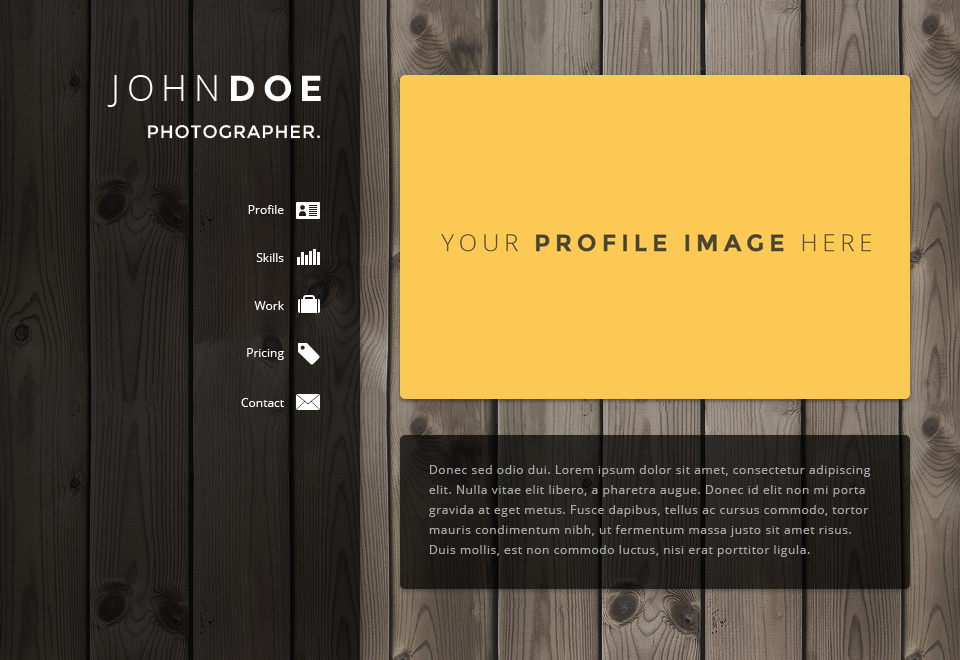
<style>
.page{position:relative;width:960px;height:660px;background:#fcc954}
.page>*{position:absolute;margin:0}
.t1{font:36px "OpenSans-Light";letter-spacing:0.2em;color:#ffffff;text-transform:uppercase}
.t2{font:36px "Montserrat-Bold";letter-spacing:0.2em;color:#ffffff;text-transform:uppercase}
.t3{font:18px "Montserrat-Regular";letter-spacing:0.05em;color:#ffffff;text-transform:uppercase}
.t4{font:12px "OpenSans";color:#ffffff}
.t5{font:12px/20px "OpenSans";letter-spacing:0.05em;color:#a7abad}
</style>
<div class="page">
<p class="t1" style="left:107px;top:75px;width:214px;height:32px">John<span class="t2">Doe</span></p>
<p class="t3" style="left:148px;top:125px;width:172px;height:14px">Photographer.</p>
<p class="t4" style="left:248px;top:205px;width:36px;height:9px">Profile</p>
<p class="t4" style="left:256px;top:253px;width:28px;height:9px">Skills</p>
<p class="t4" style="left:254px;top:301px;width:30px;height:9px">Work</p>
<p class="t4" style="left:247px;top:348px;width:37px;height:12px">Pricing</p>
<p class="t4" style="left:241px;top:398px;width:43px;height:9px">Contact</p>
<p class="t5" style="left:429px;top:465px;width:442px;height:92px">Donec sed odio dui. Lorem ipsum dolor sit amet, consectetur adipiscing elit. Nulla vitae elit libero, a pharetra augue. Donec id elit non mi porta gravida at eget metus. Fusce dapibus, tellus ac cursus commodo, tortor mauris condimentum nibh, ut fermentum massa justo sit amet risus. Duis mollis, est non commodo luctus, nisi erat porttitor ligula.</p>
</div>
